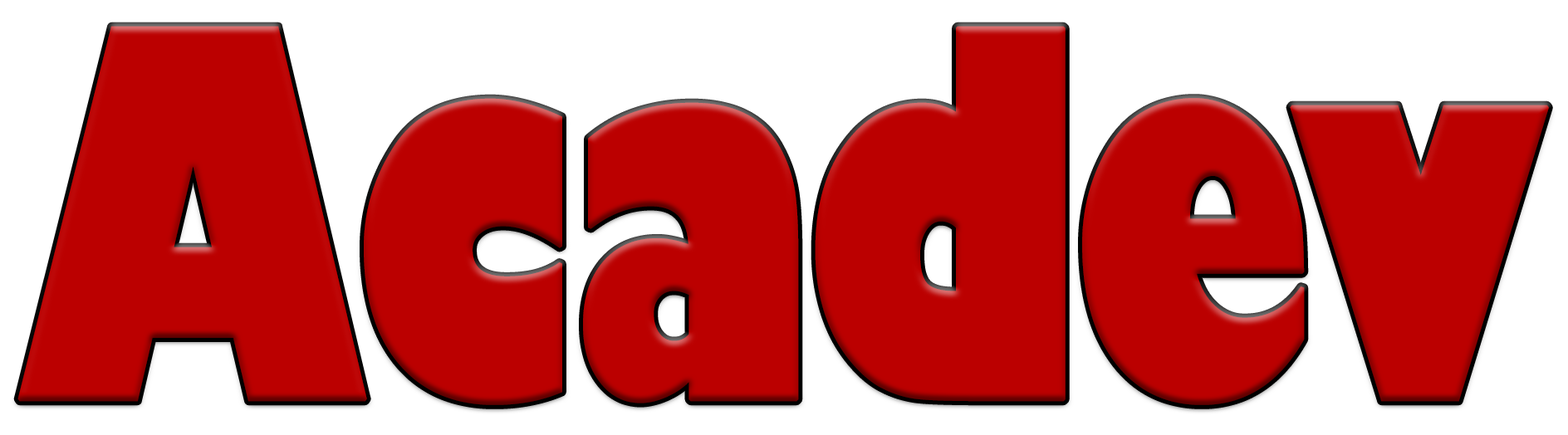
<style>
.page{position:relative;width:1568px;height:435px;background:#bb0000}
.page>*{position:absolute;margin:0}
.t1{font:498.3px "GillSans-UltraBoldCondensed";letter-spacing:-0.05em;color:#bb0000;font-weight:bold;scale:1.03 1}
</style>
<div class="page">
<p class="t1" style="left:17px;top:26px;width:1532px;height:379px">Acadev</p>
</div>
